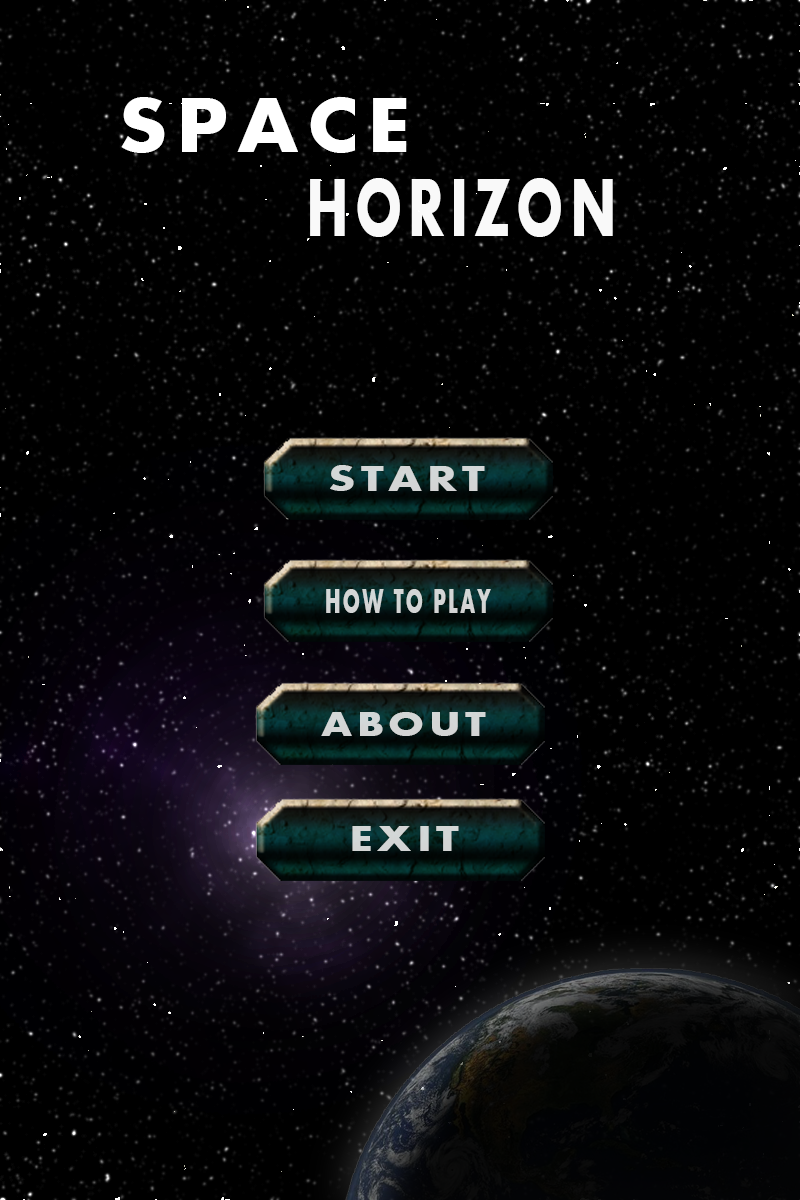
<style>
.page{position:relative;width:800px;height:1200px;background:#000000}
.page>*{position:absolute;margin:0}
.t1{font:81px "Aharoni-Bold";letter-spacing:0.1em;color:#ffffff;scale:1.07 1}
.t2{font:84.7px "Aharoni-Bold";letter-spacing:0.1em;color:#ffffff;scale:0.68 1}
.t3{font:36.8px "Aharoni-Bold";letter-spacing:0.1em;color:#d3d6d5;scale:1.31 1}
.t4{font:35.9px "Aharoni-Bold";letter-spacing:0.1em;color:#d3d6d5;scale:0.59 1}
.t5{font:35.9px "Aharoni-Bold";letter-spacing:0.1em;color:#d3d5d5;scale:1.23 1}
</style>
<div class="page">
<p class="t1" style="left:121px;top:97px;width:286px;height:56px">SPACE</p>
<p class="t2" style="left:310px;top:178px;width:303px;height:59px;opacity:0.96">HORIZON</p>
<p class="t3" style="left:330px;top:465px;width:155px;height:26px">START</p>
<p class="t4" style="left:326px;top:589px;width:165px;height:24px">HOW TO PLAY</p>
<p class="t5" style="left:321px;top:712px;width:165px;height:24px">ABOUT</p>
<p class="t3" style="left:352px;top:826px;width:107px;height:25px">EXIT</p>
</div>
